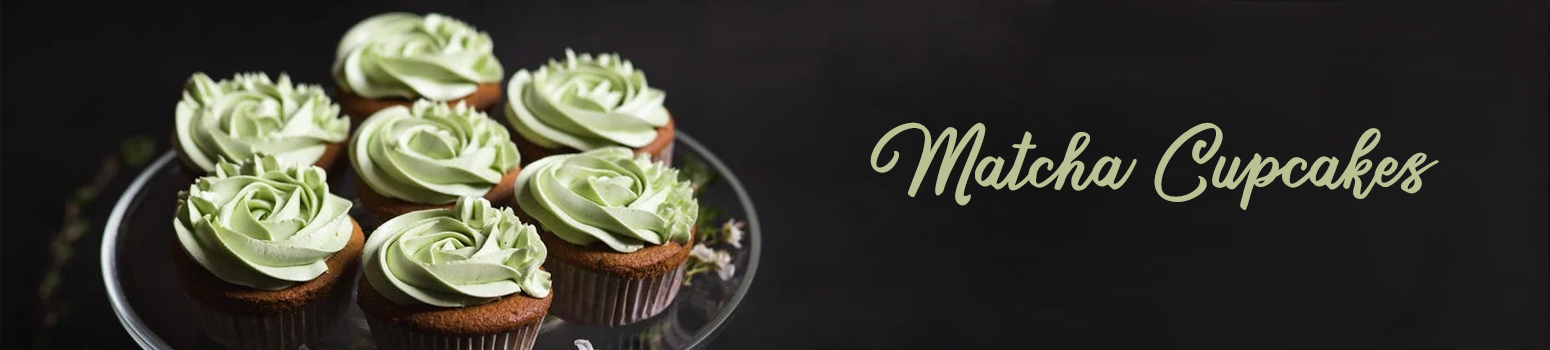
<style>
.page{position:relative;width:1550px;height:350px}
.page>*{position:absolute;margin:0}
.t1{font:82.7px "SweetsDelightDEMO";letter-spacing:-0.02em;color:#bac295;font-weight:bold}
</style>
<div class="page">
<p class="t1" style="left:870px;top:122px;width:569px;height:88px">Matcha Cupcakes</p>
</div>
